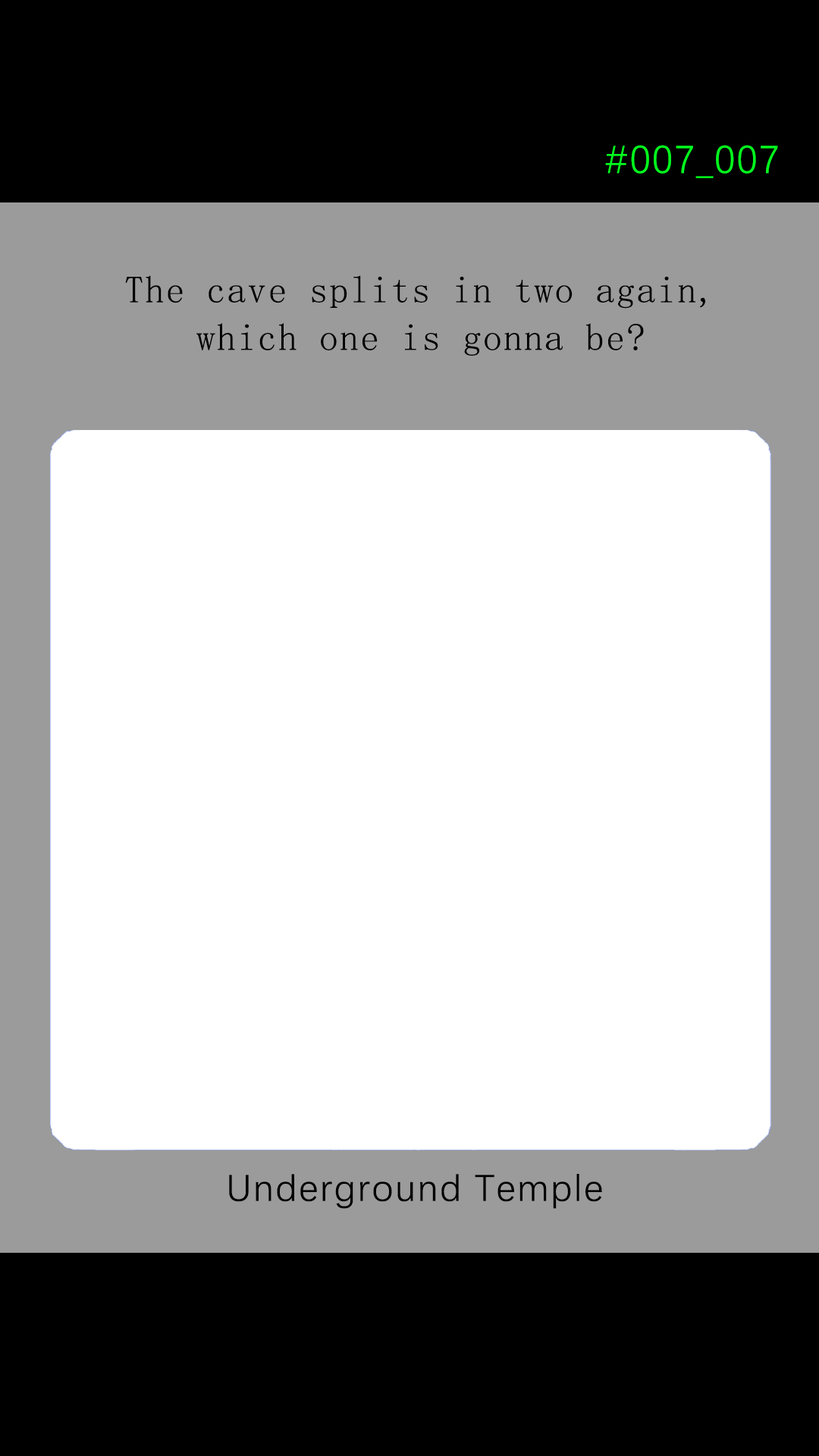
<style>
.page{position:relative;width:819px;height:1456px;background:#ffffff}
.page>*{position:absolute;margin:0}
.t1{font:39.2px "DengXian-Regular";letter-spacing:0.04em;color:#00ff1e}
.t2{font:37.9px/47.6px "SimSun";letter-spacing:0.04em;color:#000000}
.t3{font:37.9px "DengXian-Regular";letter-spacing:0.04em;color:#000000}
</style>
<div class="page">
<p class="t1" style="left:605px;top:145px;width:173px;height:33px">#007_007</p>
<p class="t2" style="left:125px;top:275px;width:580px;height:81px;text-align:center">The cave splits in two again,<br>which one is gonna be?</p>
<p class="t3" style="left:229px;top:1174px;width:373px;height:35px">Underground Temple</p>
</div>
